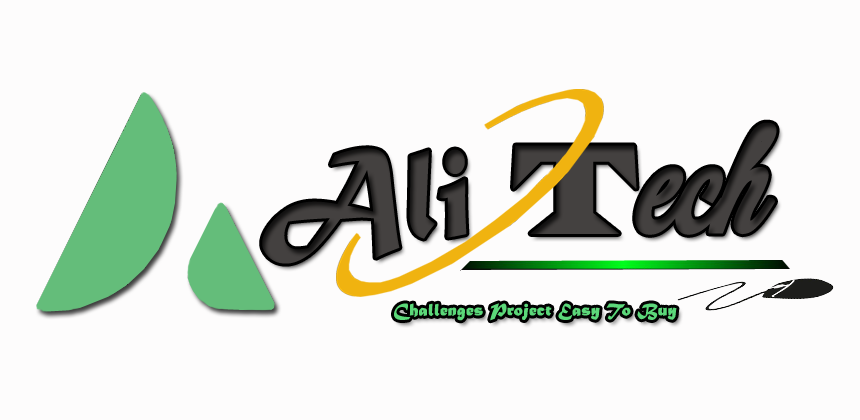
<style>
.page{position:relative;width:860px;height:420px;background:#fdfcfc}
.page>*{position:absolute;margin:0}
.t1{font:131.8px "MaturaMTScriptCapitals";color:#444140;font-weight:bold;scale:0.8 1}
.t2{font:131.8px "LatinWide";color:#444140;font-weight:bold;scale:0.8 1}
.t3{font:131.8px "Violetta";color:#444140;font-weight:bold;scale:0.8 1}
.t4{font:18px "MaturaMTScriptCapitals";color:#5bd879;font-weight:bold}
</style>
<div class="page">
<p class="t1" style="left:262px;top:122px;width:515px;height:142px">Ali <span class="t2">T</span><span class="t3">ech</span></p>
<p class="t4" style="left:394px;top:303px;width:283px;height:18px">Challenges Project Easy To Buy</p>
</div>
